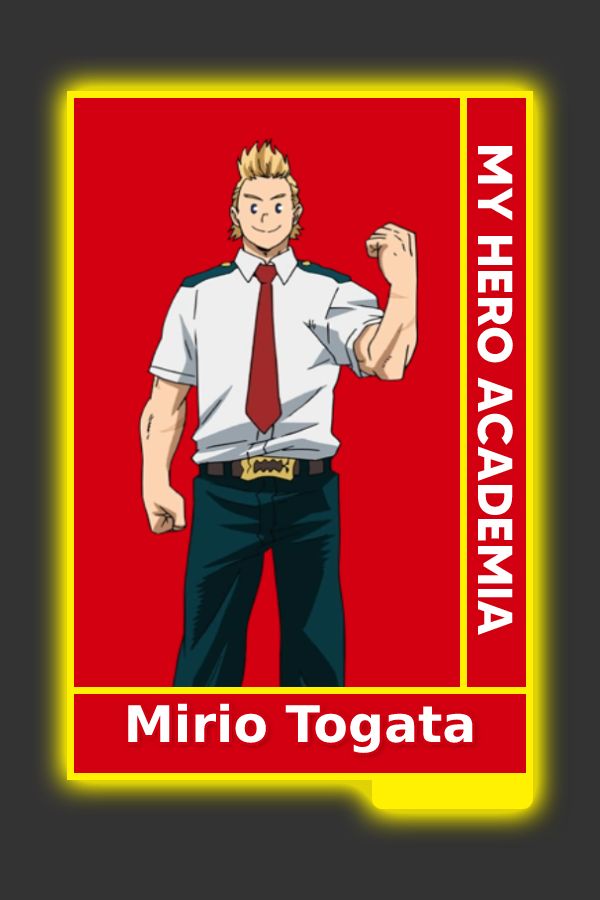
<style>
.page{position:relative;width:600px;height:900px;background:#d20010}
.page>*{position:absolute;margin:0}
.t1{font:48.8px "MADETOMMY-Bold";color:#ffffff}
.t2{font:50.5px "MADETOMMY-Bold";color:#ffffff}
</style>
<div class="page">
<p class="t1" style="left:477px;top:146px;width:36px;height:489px;rotate:90deg">MY HERO ACADEMIA</p>
<p class="t2" style="left:128px;top:703px;width:345px;height:50px">Mirio Togata</p>
</div>
